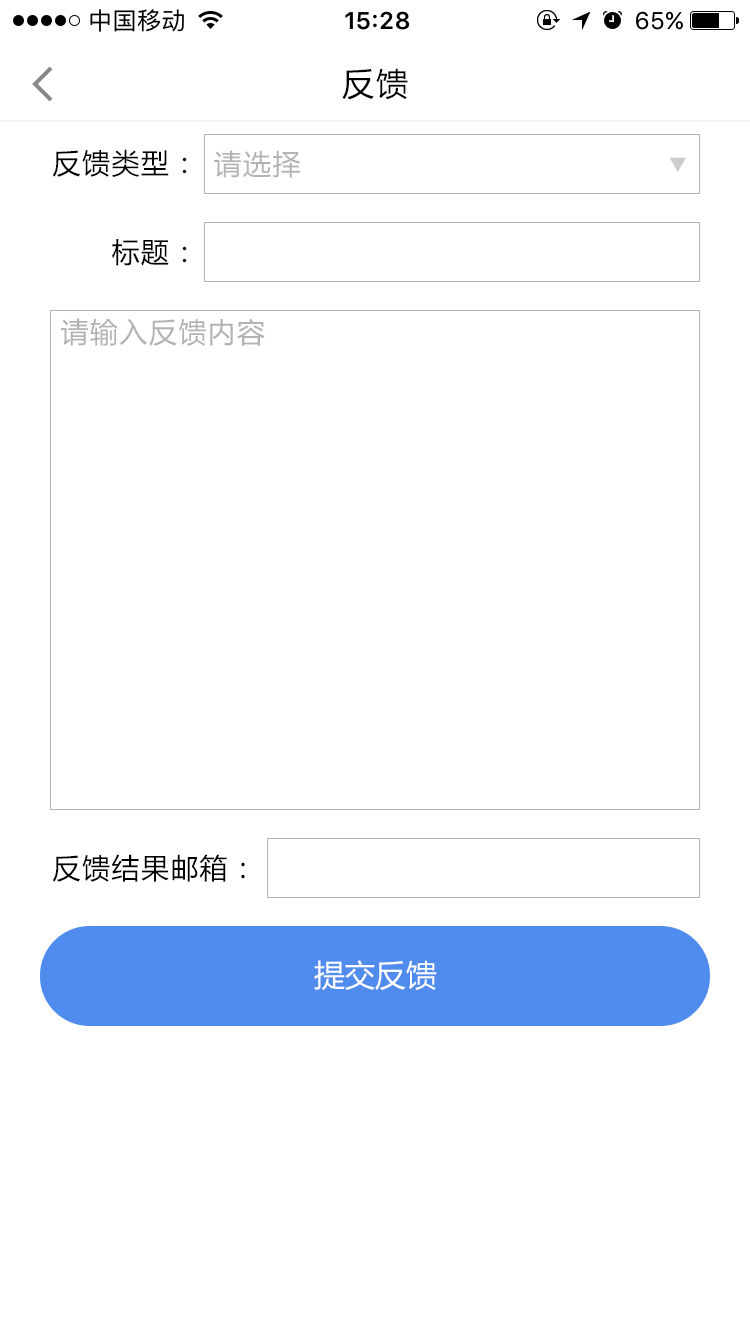
<style>
.page{position:relative;width:750px;height:1334px;background:#ffffff}
.page>*{position:absolute;margin:0}
.t1{font:32px "MicrosoftYaHei";letter-spacing:0.05em;color:#000000}
.t2{font:28px "MicrosoftYaHei";letter-spacing:0.05em;color:#000000}
.t3{font:28px "MicrosoftYaHei";letter-spacing:0.05em;color:#b3b3b3}
.t4{font:28px "MicrosoftYaHei";letter-spacing:0.05em;color:#b2b2b2}
.t5{font:30.7px "MicrosoftYaHei";color:#ffffff}
</style>
<div class="page">
<p class="t1" style="left:342px;top:68px;width:66px;height:32px">反馈</p>
<p class="t2" style="left:52px;top:149px;width:135px;height:28px">反馈类型：</p>
<p class="t3" style="left:214px;top:150px;width:86px;height:28px">请选择</p>
<p class="t2" style="left:112px;top:239px;width:75px;height:27px">标题：</p>
<p class="t4" style="left:61px;top:318px;width:204px;height:28px">请输入反馈内容</p>
<p class="t2" style="left:52px;top:854px;width:193px;height:28px">反馈结果邮箱：</p>
<p class="t5" style="left:314px;top:960px;width:123px;height:30px">提交反馈</p>
</div>
